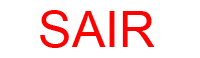
<style>
.page{position:relative;width:200px;height:58px;background:#ffffff}
.page>*{position:absolute;margin:0}
.t1{font:50.5px "ArialMT";color:#ff0000}
</style>
<div class="page">
<p class="t1" style="left:40px;top:10px;width:115px;height:38px">SAIR</p>
</div>
